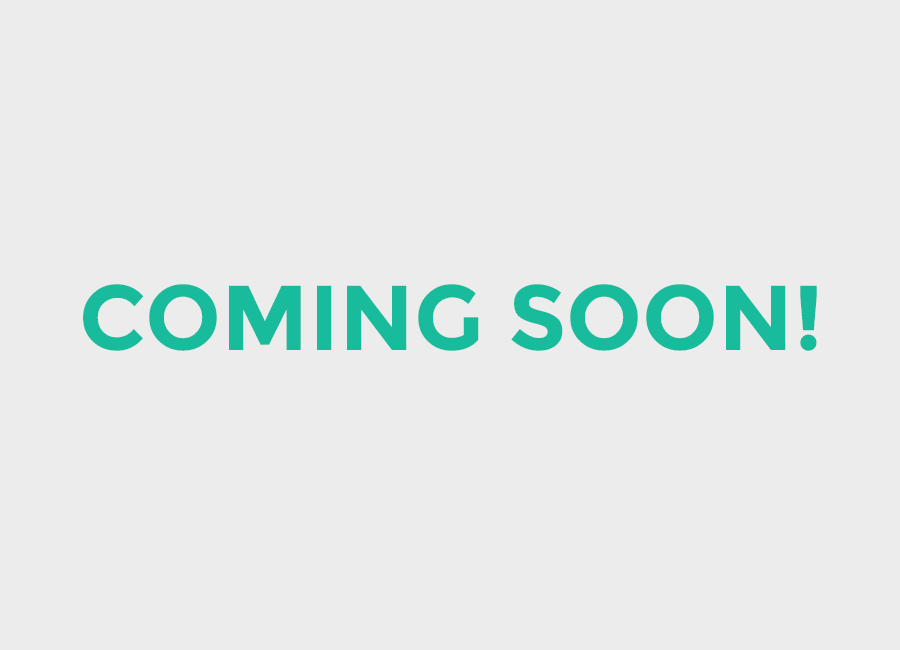
<style>
.page{position:relative;width:900px;height:650px;background:#ececec}
.page>*{position:absolute;margin:0}
.t1{font:92px "Montserrat-Bold";color:#18bc9c}
</style>
<div class="page">
<p class="t1" style="left:83px;top:284px;width:734px;height:67px">COMING SOON!</p>
</div>
